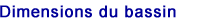
<style>
.page{position:relative;width:205px;height:20px;background:#ffffff}
.page>*{position:absolute;margin:0}
.t1{font:16px "ArialMT";letter-spacing:0.04em;color:#000099;font-weight:bold}
</style>
<div class="page">
<p class="t1" style="left:0px;top:5px;width:176px;height:13px">Dimensions du bassin</p>
</div>
